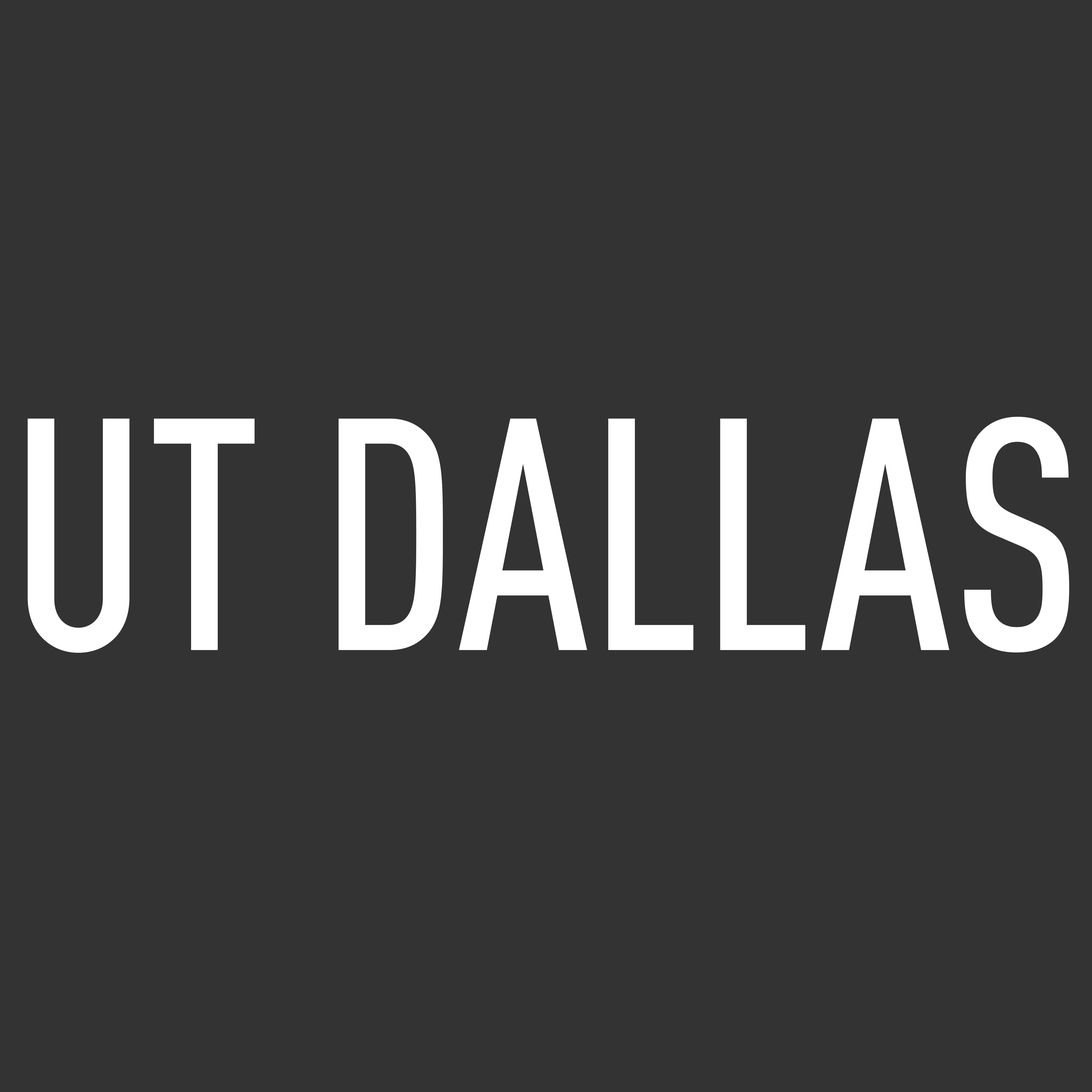
<style>
.page{position:relative;width:1092px;height:1092px;background:#333333}
.page>*{position:absolute;margin:0}
.t1{font:325.1px "DINPro-CondMedium";color:#ffffff;scale:0.95 1}
</style>
<div class="page">
<p class="t1" style="left:28px;top:417px;width:1041px;height:236px">UT DALLAS</p>
</div>
